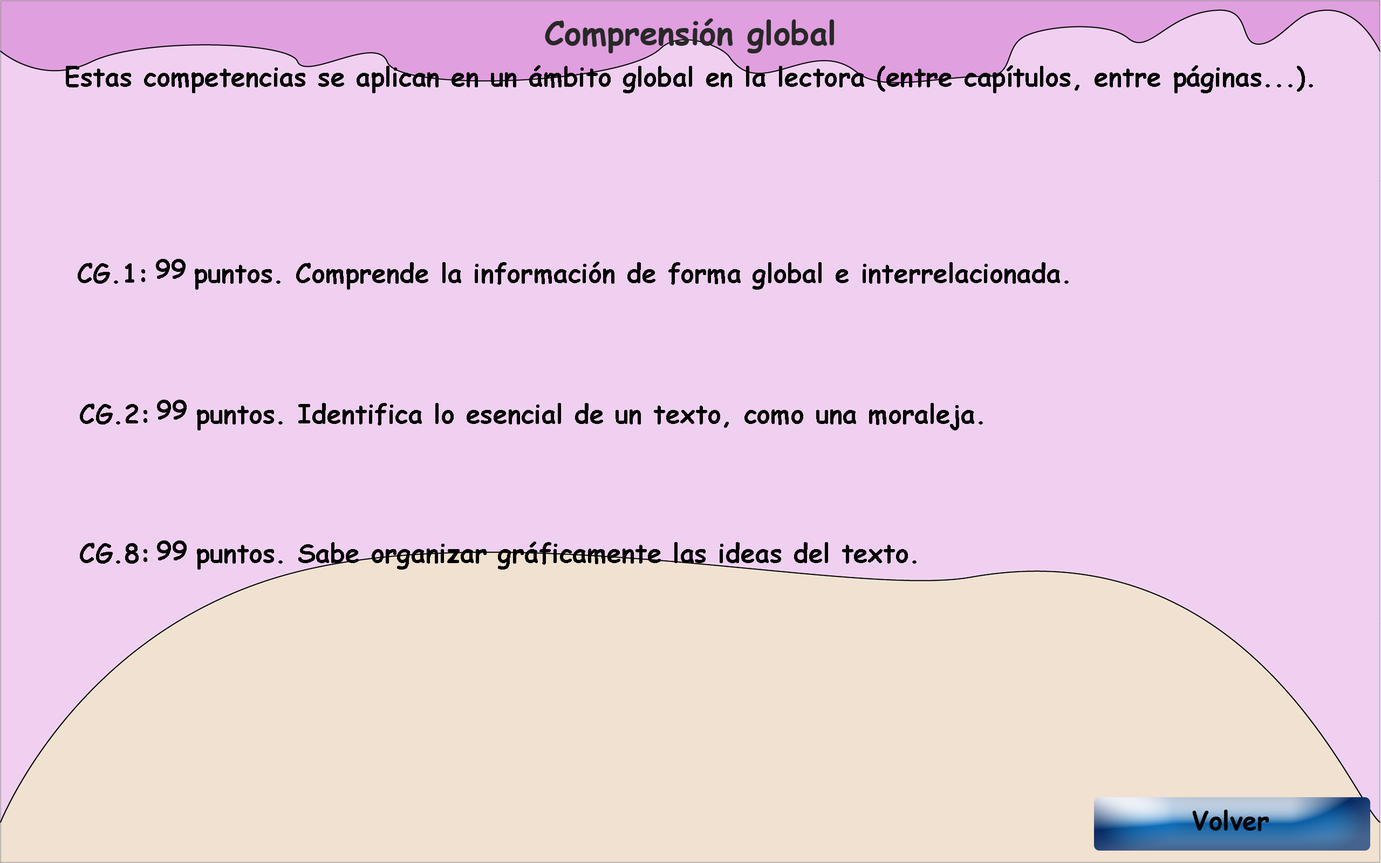
<style>
.page{position:relative;width:1381px;height:863px;background:#efd0f0}
.page>*{position:absolute;margin:0}
.t1{font:32.4px "ComicSansMS-Bold";color:#282828}
.t2{font:25.9px "ComicSansMS-Bold";color:#000000}
</style>
<div class="page">
<p class="t1" style="left:545px;top:18px;width:289px;height:35px">Comprensión global</p>
<p class="t2" style="left:66px;top:65px;width:1247px;height:28px">Estas competencias se aplican en un ámbito global en la lectora (entre capítulos, entre páginas...).</p>
<p class="t2" style="left:78px;top:262px;width:991px;height:28px">CG.1:    puntos. Comprende la información de forma global e interrelacionada.</p>
<p class="t2" style="left:156px;top:259px;width:30px;height:20px">99</p>
<p class="t2" style="left:157px;top:400px;width:30px;height:20px">99</p>
<p class="t2" style="left:80px;top:403px;width:903px;height:28px">CG.2:    puntos. Identifica lo esencial de un texto, como una moraleja.</p>
<p class="t2" style="left:80px;top:542px;width:837px;height:28px">CG.8:    puntos. Sabe organizar gráficamente las ideas del texto.</p>
<p class="t2" style="left:157px;top:541px;width:30px;height:20px">99</p>
<p class="t2" style="left:1192px;top:810px;width:78px;height:21px">Volver</p>
</div>
